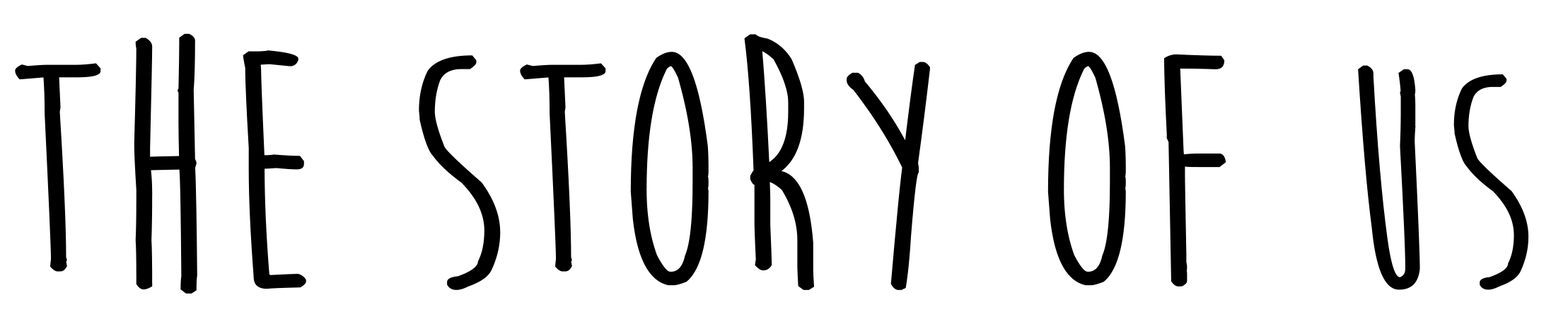
<style>
.page{position:relative;width:1568px;height:329px;background:#ffffff}
.page>*{position:absolute;margin:0}
.t1{font:345.2px "MoonFlowerBold";color:#000000;scale:1.04 1}
.t2{font:316.9px "MoonFlowerBold";color:#000000;scale:1.04 1}
</style>
<div class="page">
<p class="t1" style="left:15px;top:33px;width:1514px;height:261px">THE STORY OF <span class="t2">US</span></p>
</div>
